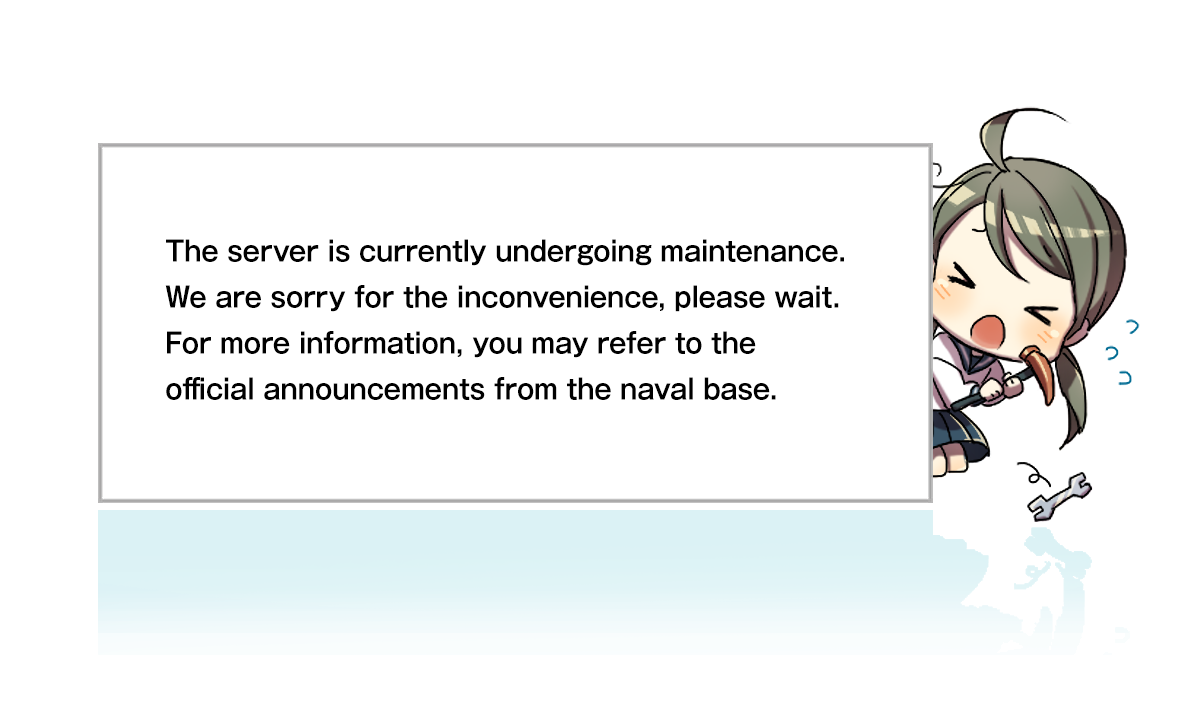
<style>
.page{position:relative;width:1200px;height:720px;background:#ffffff}
.page>*{position:absolute;margin:0}
.t1{font:28px/46px "GothicMB101Pro-DeBold";color:#000000;scale:0.9 1}
</style>
<div class="page">
<p class="t1" style="left:165px;top:239px;width:679px;height:161px">The server is currently undergoing maintenance.<br>We are sorry for the inconvenience, please wait.<br>For more information, you may refer to the<br>official announcements from the naval base.</p>
</div>
